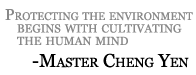
<style>
.page{position:relative;width:196px;height:75px;background:#ffffff}
.page>*{position:absolute;margin:0}
.t1{font:16.7px/12.5px "Georgia";color:#888888;font-variant:small-caps}
.t2{font:15.6px/12.5px "Georgia";color:#888888;font-variant:small-caps}
.t3{font:18.7px "Georgia";color:#000000;font-variant:small-caps}
</style>
<div class="page">
<p class="t1" style="left:5px;top:9px;width:188px;height:37px"><span class="t2">Protecting the environment<br></span>   begins with cultivating<br>   the human mind</p>
<p class="t3" style="left:32px;top:53px;width:157px;height:15px">-Master Cheng Yen</p>
</div>
